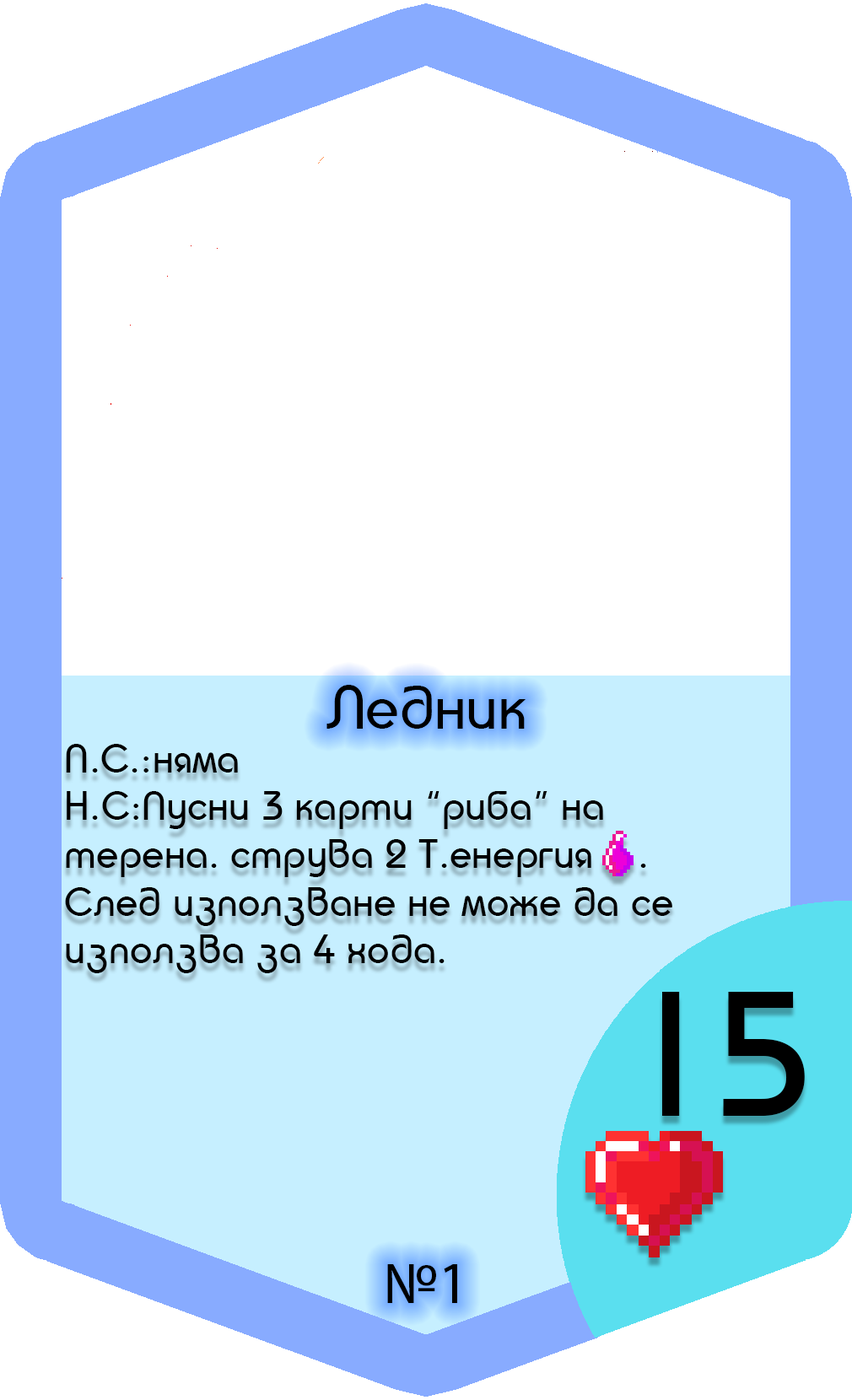
<style>
.page{position:relative;width:852px;height:1400px;background:#ffffff}
.page>*{position:absolute;margin:0}
.t1{font:59.8px "TaurusNormal";color:#000000}
.t2{font:59.8px "MyriadPro-Regular";color:#000000}
.t3{font:39.8px "TaurusNormal";color:#000000}
.t4{font:173.1px "TaurusNormal";color:#000000}
</style>
<div class="page">
<p class="t1" style="left:326px;top:685px;width:199px;height:618px;text-align:center">Ледник<br><br><br><br><br><br><br><br><span class="t2">№1</span></p>
<p class="t3" style="left:65px;top:744px;width:607px;height:229px">П.С.:няма<br>Н.С:Пусни 3 карти “риба” на<br>терена. струва 2 Т.енергия    .<br>След използване не може да се<br>използва за 4 хода.</p>
<p class="t4" style="left:662px;top:992px;width:143px;height:124px">15</p>
</div>
